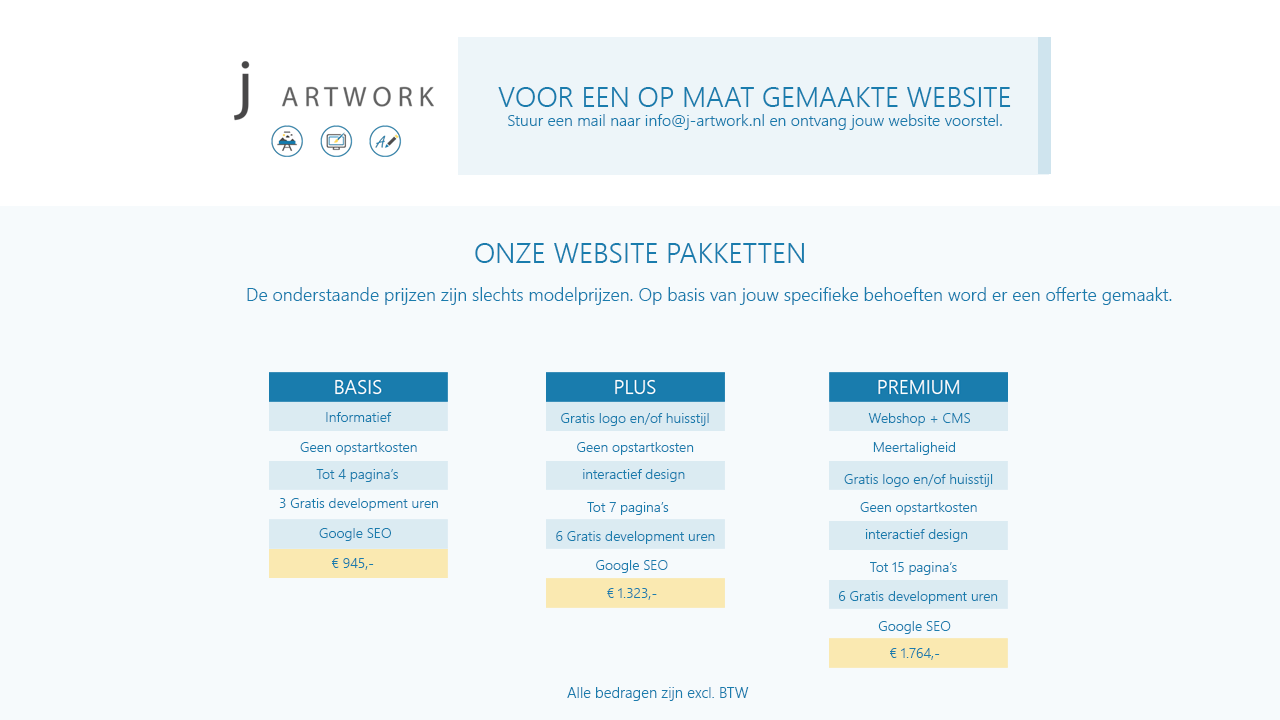
<style>
.page{position:relative;width:1280px;height:720px;background:#f6fafc}
.page>*{position:absolute;margin:0}
.t1{font:16px "NirmalaUI-Semilight";color:#197cad}
.t2{font:28px "NirmalaUI-Semilight";color:#197cad}
.t3{font:18px "NirmalaUI-Semilight";color:#197cad}
.t4{font:14px "NirmalaUI-Semilight";color:#197cad}
.t5{font:15px "NirmalaUI-Semilight";color:#197cad}
</style>
<div class="page">
<p class="t1" style="left:498px;top:87px;width:513px;height:43px;text-align:center"><span class="t2">VOOR EEN OP MAAT GEMAAKTE WEBSITE<br></span>Stuur een mail naar info@j-artwork.nl en ontvang jouw website voorstel.</p>
<p class="t2" style="left:475px;top:243px;width:329px;height:20px">ONZE WEBSITE PAKKETTEN</p>
<p class="t3" style="left:247px;top:287px;width:925px;height:18px">De onderstaande prijzen zijn slechts modelprijzen. Op basis van jouw specifieke behoeften word er een offerte gemaakt.</p>
<p class="t4" style="left:326px;top:412px;width:66px;height:10px">Informatief</p>
<p class="t4" style="left:561px;top:413px;width:148px;height:13px">Gratis logo en/of huisstijl</p>
<p class="t4" style="left:868px;top:413px;width:102px;height:13px">Webshop + CMS</p>
<p class="t4" style="left:300px;top:442px;width:117px;height:13px">Geen opstartkosten</p>
<p class="t4" style="left:577px;top:442px;width:117px;height:13px">Geen opstartkosten</p>
<p class="t4" style="left:873px;top:442px;width:82px;height:13px">Meertaligheid</p>
<p class="t4" style="left:316px;top:469px;width:82px;height:13px">Tot 4 pagina’s</p>
<p class="t4" style="left:583px;top:469px;width:102px;height:13px">interactief design</p>
<p class="t4" style="left:844px;top:474px;width:149px;height:13px">Gratis logo en/of huisstijl</p>
<p class="t4" style="left:279px;top:498px;width:159px;height:13px">3 Gratis development uren</p>
<p class="t4" style="left:587px;top:502px;width:82px;height:13px">Tot 7 pagina’s</p>
<p class="t4" style="left:860px;top:502px;width:117px;height:13px">Geen opstartkosten</p>
<p class="t4" style="left:319px;top:528px;width:72px;height:13px">Google SEO</p>
<p class="t4" style="left:556px;top:531px;width:159px;height:13px">6 Gratis development uren</p>
<p class="t4" style="left:865px;top:529px;width:103px;height:13px">interactief design</p>
<p class="t4" style="left:332px;top:558px;width:42px;height:12px">€ 945,-</p>
<p class="t4" style="left:596px;top:560px;width:72px;height:13px">Google SEO</p>
<p class="t4" style="left:870px;top:562px;width:87px;height:13px">Tot 15 pagina’s</p>
<p class="t4" style="left:607px;top:588px;width:50px;height:12px">€ 1.323,-</p>
<p class="t4" style="left:839px;top:591px;width:159px;height:13px">6 Gratis development uren</p>
<p class="t4" style="left:878px;top:621px;width:73px;height:13px">Google SEO</p>
<p class="t4" style="left:890px;top:648px;width:50px;height:12px">€ 1.764,-</p>
<p class="t5" style="left:567px;top:687px;width:182px;height:14px">Alle bedragen zijn excl. BTW</p>
</div>
